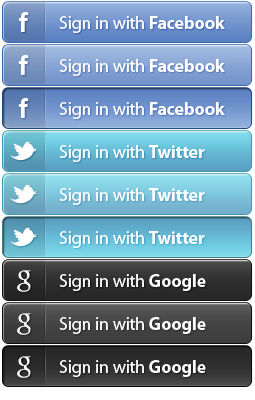
<style>
.page{position:relative;width:255px;height:400px}
.page>*{position:absolute;margin:0}
.t1{font:30px "Calibri-Bold";color:#ffffff}
.t2{font:18px "MyriadPro-Regular";letter-spacing:-0.01em;color:#ffffff}
.t3{font:18px "MyriadPro-Bold";letter-spacing:-0.01em;color:#ffffff}
</style>
<div class="page">
<p class="t1" style="left:18px;top:12px;width:11px;height:20px">f</p>
<p class="t2" style="left:59px;top:16px;width:166px;height:17px">Sign in with <span class="t3">Facebook</span></p>
<p class="t1" style="left:18px;top:55px;width:11px;height:20px">f</p>
<p class="t2" style="left:59px;top:59px;width:166px;height:17px">Sign in with <span class="t3">Facebook</span></p>
<p class="t1" style="left:18px;top:98px;width:11px;height:20px">f</p>
<p class="t2" style="left:59px;top:102px;width:166px;height:17px">Sign in with <span class="t3">Facebook</span></p>
<p class="t2" style="left:59px;top:145px;width:146px;height:17px">Sign in with <span class="t3">Twitter</span></p>
<p class="t2" style="left:59px;top:188px;width:146px;height:17px">Sign in with <span class="t3">Twitter</span></p>
<p class="t2" style="left:59px;top:231px;width:146px;height:17px">Sign in with <span class="t3">Twitter</span></p>
<p class="t2" style="left:59px;top:274px;width:147px;height:17px">Sign in with <span class="t3">Google</span></p>
<p class="t2" style="left:59px;top:317px;width:147px;height:17px">Sign in with <span class="t3">Google</span></p>
<p class="t2" style="left:59px;top:360px;width:147px;height:17px">Sign in with <span class="t3">Google</span></p>
</div>
